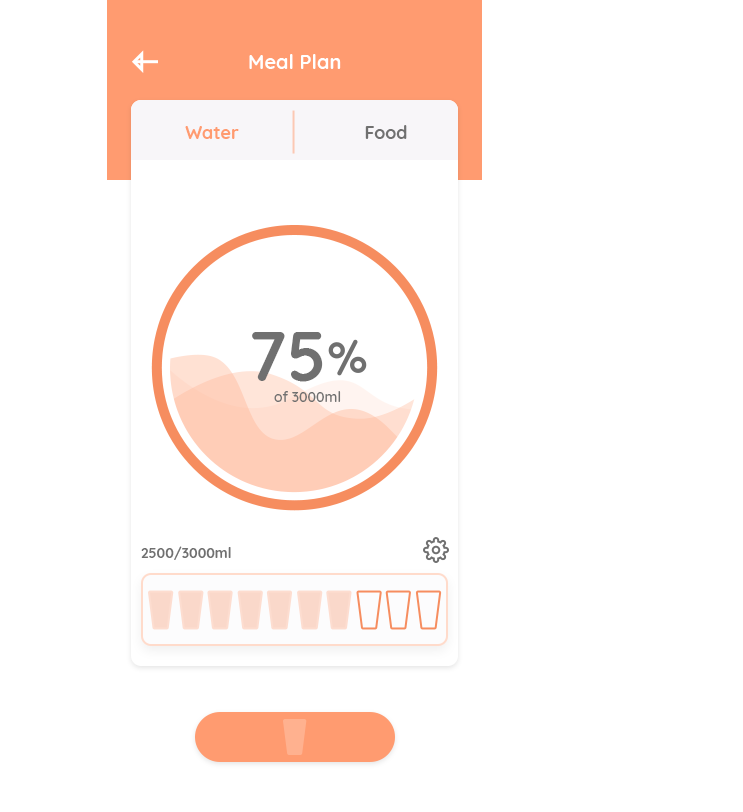
<style>
.page{position:relative;width:743px;height:812px;background:#ffffff}
.page>*{position:absolute;margin:0}
.t1{font:20px "Quicksand-Bold";color:#ffffff}
.t2{font:18px "Quicksand-Bold";color:#ff9b70}
.t3{font:18px "Quicksand-Bold";color:#707070}
.t4{font:69px "Quicksand-Bold";color:#707070}
.t5{font:14px "Quicksand-Medium";color:#707070}
.t6{font:14px "Quicksand-Bold";color:#707070}
</style>
<div class="page">
<p class="t1" style="left:249px;top:54px;width:92px;height:15px">Meal Plan</p>
<p class="t2" style="left:185px;top:126px;width:54px;height:13px">Water</p>
<p class="t3" style="left:365px;top:125px;width:42px;height:14px">Food</p>
<p class="t4" style="left:252px;top:332px;width:71px;height:50px">75</p>
<p class="t5" style="left:274px;top:391px;width:67px;height:11px">of 3000ml</p>
<p class="t6" style="left:141px;top:546px;width:90px;height:14px">2500/3000ml</p>
</div>
